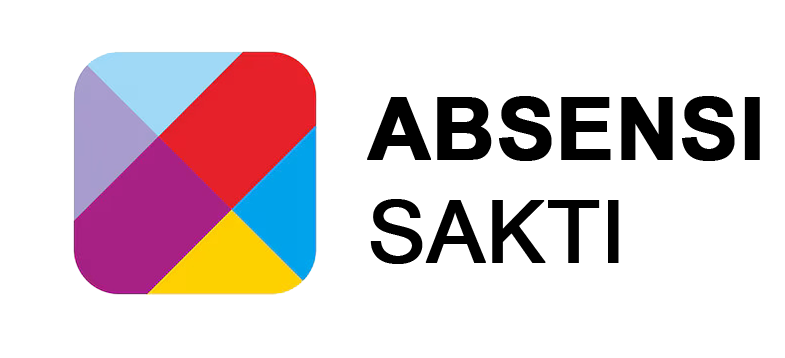
<style>
.page{position:relative;width:785px;height:358px;background:#ffffff}
.page>*{position:absolute;margin:0}
.t1{font:85.9px "Arial-BoldMT";color:#000000;text-transform:uppercase;font-weight:bold}
.t2{font:85.9px "ArialMT";color:#000000;text-transform:uppercase;font-weight:bold}
</style>
<div class="page">
<p class="t1" style="left:367px;top:96px;width:393px;height:168px">Absensi <br><span class="t2">Sakti</span></p>
</div>
